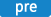
<style>
.page{position:relative;width:51px;height:17px;background:#1584c9}
.page>*{position:absolute;margin:0}
.t1{font:15px "MicrosoftYaHei";letter-spacing:-0.025em;color:#ffffff;font-weight:bold;scale:0.9 1}
</style>
<div class="page">
<p class="t1" style="left:16px;top:3px;width:21px;height:13px">pre</p>
</div>
